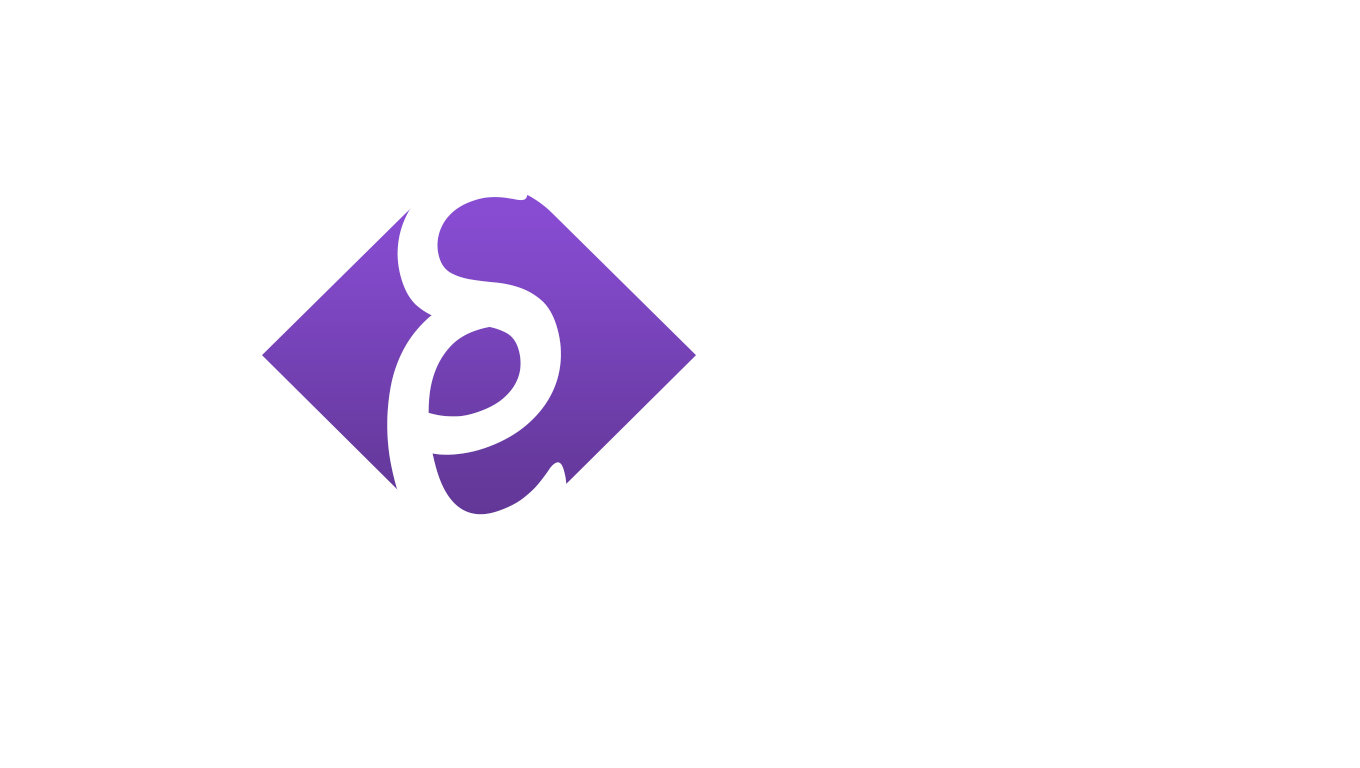
<style>
.page{position:relative;width:1360px;height:768px;background:#ffffff}
.page>*{position:absolute;margin:0}
.t1{font:560.8px "Calibri-Italic";color:#ffffff;scale:0.93 1}
.t2{font:516px "Calibri-Italic";color:#ffffff}
</style>
<div class="page">
<p class="t1" style="left:397px;top:160px;width:164px;height:295px;rotate:-21deg">s</p>
<p class="t2" style="left:387px;top:290px;width:180px;height:265px;rotate:-19deg">c</p>
</div>
